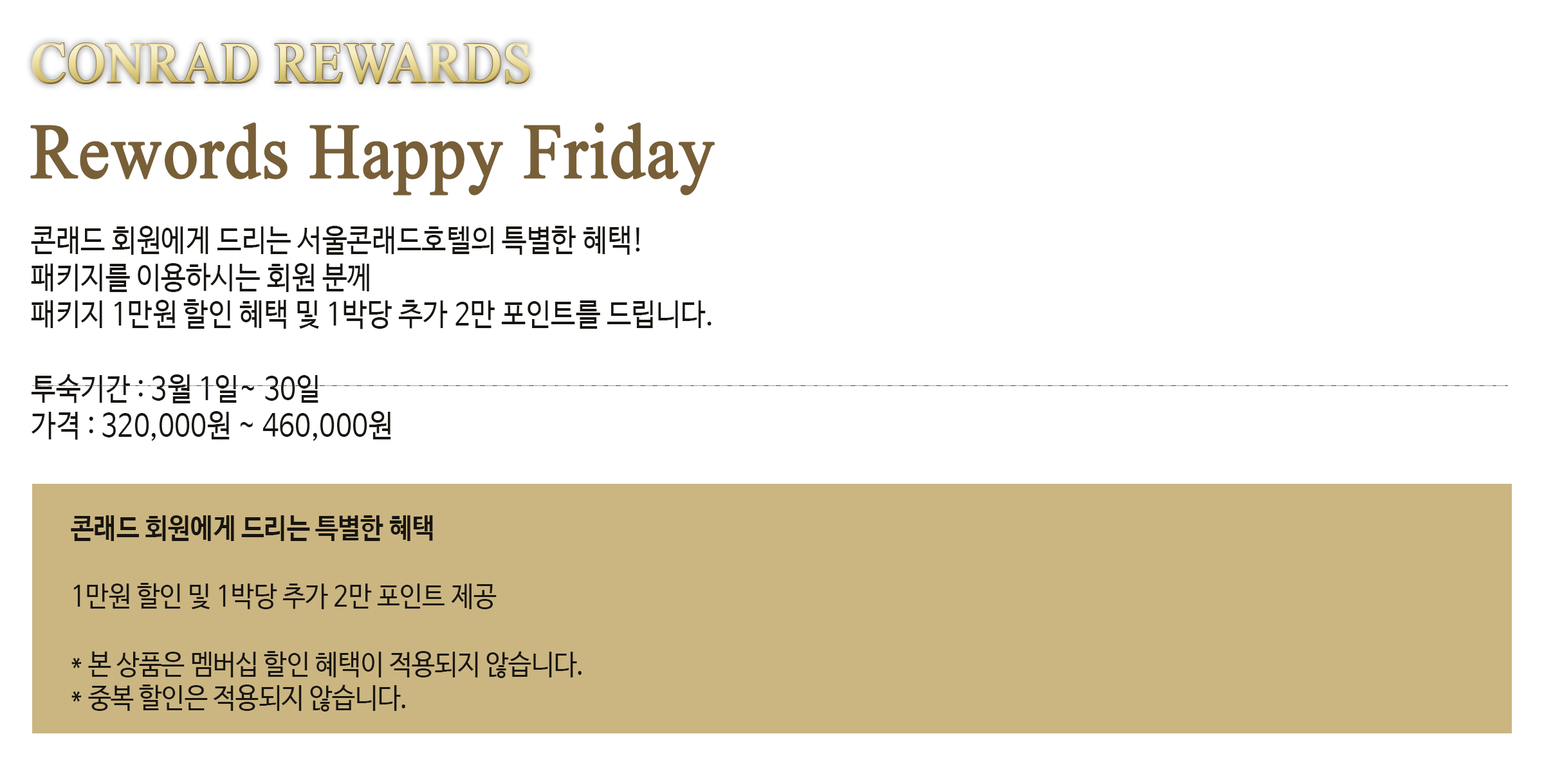
<style>
.page{position:relative;width:1544px;height:772px;background:#ffffff}
.page>*{position:absolute;margin:0}
.t1{font:57.9px "TimesNewRomanPSMT";font-weight:bold;scale:0.9 1}
.t2{font:77.2px "TimesNewRomanPSMT";color:#785f37;font-weight:bold;scale:0.9 1}
.t3{font:30.9px "NanumBarunGothic";color:#181510;scale:0.9 1}
.t4{font:28.3px "NanumBarunGothic";color:#181510;scale:0.9 1}
.t5{font:28.3px "NanumBarunGothicBold";color:#181510;scale:0.9 1}
</style>
<div class="page">
<p class="t1" style="left:32px;top:43px;width:498px;height:41px">CONRAD REWARDS</p>
<p class="t2" style="left:30px;top:122px;width:685px;height:74px">Rewords Happy Friday</p>
<p class="t3" style="left:31px;top:226px;width:681px;height:215px">콘래드 회원에게 드리는 서울콘래드호텔의 특별한 혜택!<br>패키지를 이용하시는 회원 분께 <br>패키지 1만원 할인 혜택 및 1박당 추가 2만 포인트를 드립니다.<br><br>투숙기간 : 3월 1일~ 30일<br>가격 : 320,000원 ~ 460,000원</p>
<p class="t4" style="left:71px;top:515px;width:511px;height:197px"><span class="t5">콘래드 회원에게 드리는 특별한 혜택<br></span><br>1만원 할인 및 1박당 추가 2만 포인트 제공<br><br>* 본 상품은 멤버십 할인 혜택이 적용되지 않습니다.<br>* 중복 할인은 적용되지 않습니다.</p>
</div>
